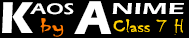
<style>
.page{position:relative;width:189px;height:38px;background:#000000}
.page>*{position:absolute;margin:0}
.t1{font:46.1px "ErasITC-Bold";color:#ffffff;scale:0.94 1}
.t2{font:15.7px "ErasITC-Demi";color:#ffffff;scale:1.32 1}
.t3{font:48.9px "ErasITC-Bold";color:#ffffff;scale:0.89 1}
.t4{font:16.6px "ErasITC-Demi";color:#ffffff;scale:1.73 1}
.t5{font:20.9px "Chiller-Regular";color:#ff7b00;scale:1.74 1}
.t6{font:19.1px "Chiller-Regular";color:#ffd200;scale:1.27 1}
</style>
<div class="page">
<p class="t1" style="left:2px;top:2px;width:31px;height:31px">K</p>
<p class="t2" style="left:30px;top:3px;width:44px;height:12px">AOS</p>
<p class="t3" style="left:74px;top:1px;width:38px;height:33px">A</p>
<p class="t4" style="left:112px;top:3px;width:72px;height:11px">NIME</p>
<p class="t5" style="left:40px;top:18px;width:24px;height:19px">by</p>
<p class="t6" style="left:113px;top:19px;width:70px;height:16px">Class 7 H</p>
</div>
